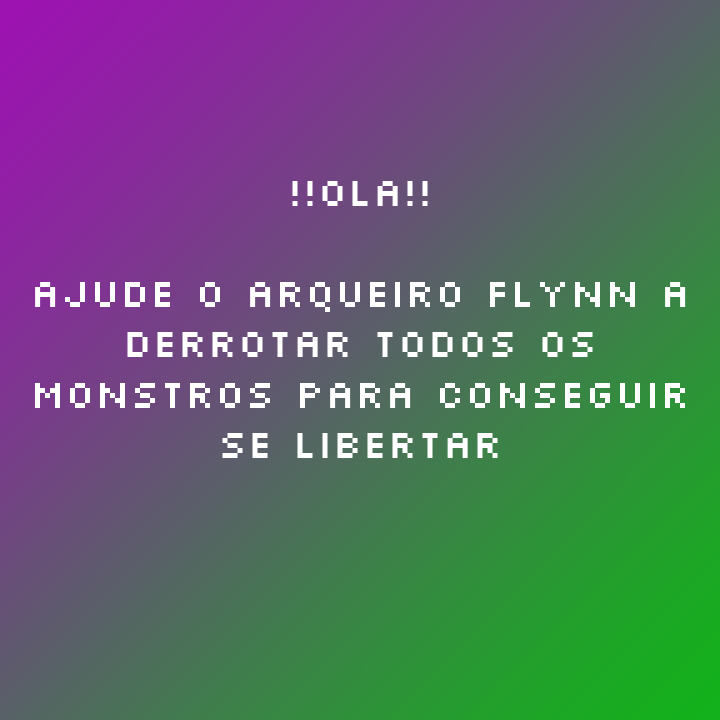
<style>
.page{position:relative;width:720px;height:720px}
.page>*{position:absolute;margin:0}
.t1{font:42px "Silkscreen";color:#ffffff}
</style>
<div class="page">
<p class="t1" style="left:35px;top:181px;width:651px;height:277px;text-align:center">!!ola!!<br><br>ajude o arqueiro flynn a <br>derrotar todos os monstros para conseguir se libertar</p>
</div>
